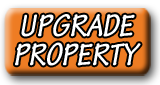
<style>
.page{position:relative;width:160px;height:85px}
.page>*{position:absolute;margin:0}
.t1{font:33.3px "TektonPro-BoldCond";color:#ffffff;font-style:italic}
</style>
<div class="page">
<p class="t1" style="left:21px;top:14px;width:114px;height:23px">UPGRADE</p>
<p class="t1" style="left:15px;top:42px;width:126px;height:24px">PROPERTY</p>
</div>
